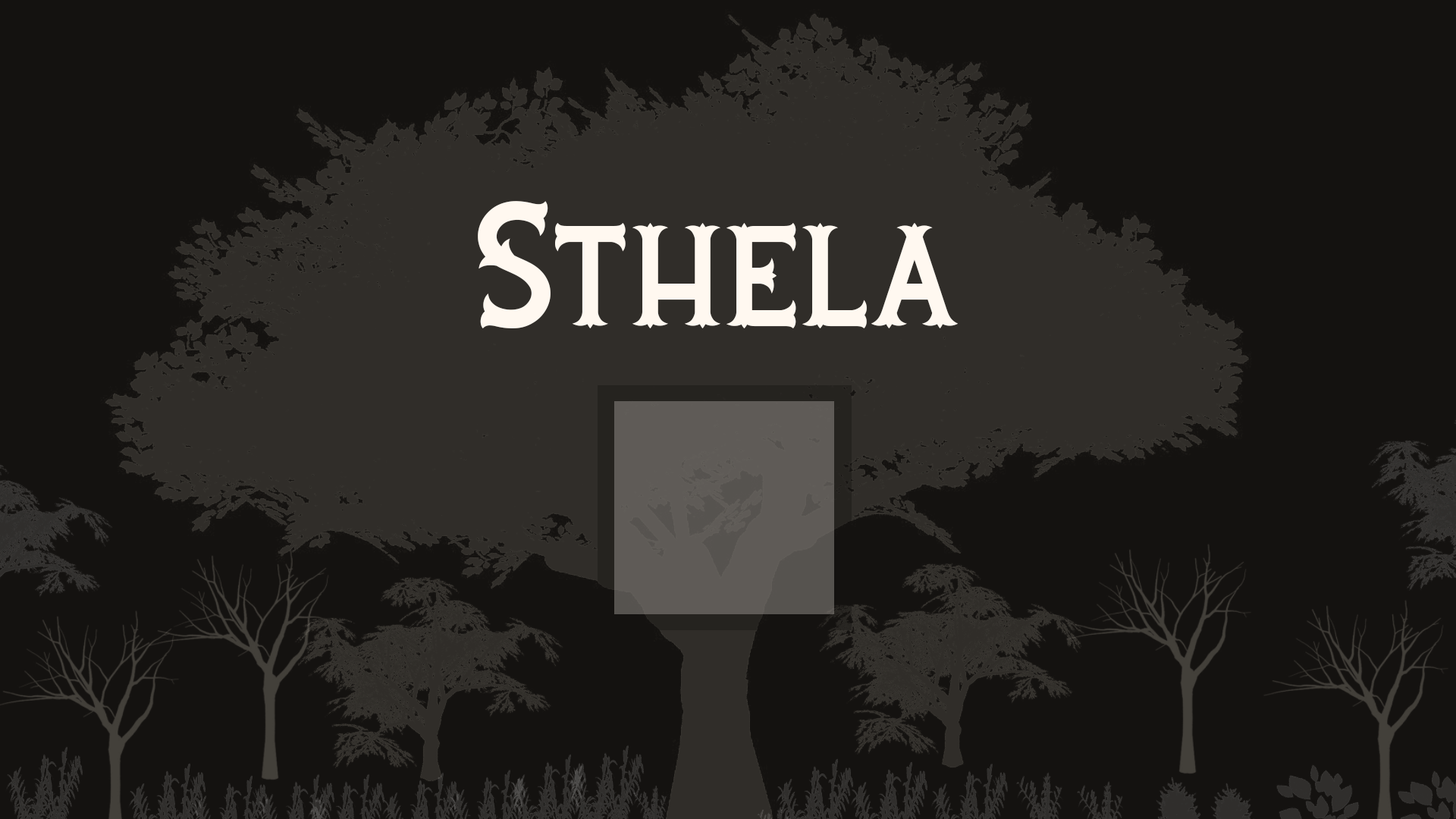
<style>
.page{position:relative;width:1456px;height:819px;background:#141210}
.page>*{position:absolute;margin:0}
.t1{font:158px "Rooters";color:#fff8f0}
</style>
<div class="page">
<p class="t1" style="left:478px;top:201px;width:481px;height:127px">Sthela</p>
</div>
